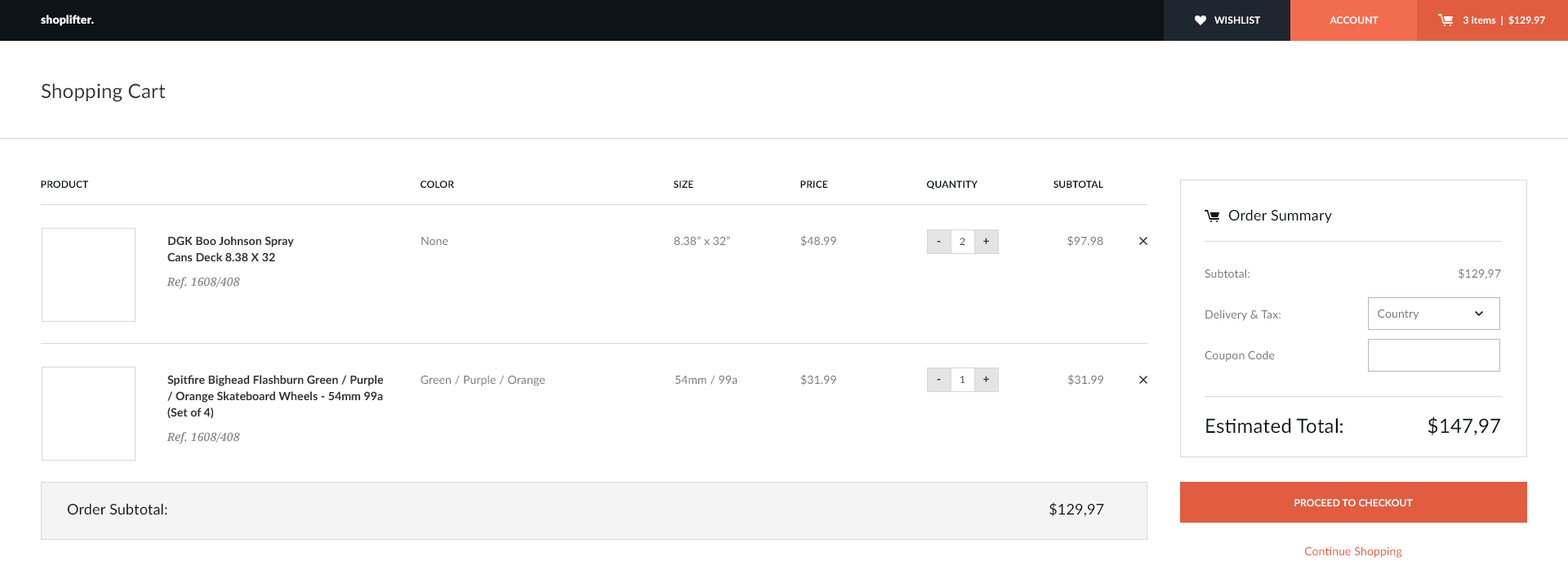
<style>
.page{position:relative;width:1568px;height:588px;background:#ffffff}
.page>*{position:absolute;margin:0}
.t1{font:11.4px "Lato-Black";letter-spacing:0.01em;color:#ffffff}
.t2{font:9.8px "Lato-Bold";letter-spacing:0.01em;color:#ffffff;text-transform:uppercase}
.t3{font:9.8px "Lato-Bold";letter-spacing:0.01em;color:#ffffff}
.t4{font:19.6px "Lato-Regular";letter-spacing:0.01em;color:#313131}
.t5{font:9.8px "Lato-Bold";letter-spacing:0.01em;color:#0e1317;text-transform:uppercase}
.t6{font:14.7px "Lato-Regular";letter-spacing:0.01em;color:#0e1317}
.t7{font:11.4px/16.3px "Lato-Bold";color:#313131}
.t8{font:11.4px/24.5px "DroidSerif-Italic";letter-spacing:0.01em;color:#313131}
.t9{font:11.4px "Lato-Regular";color:#767676}
.t10{font:11.4px "Lato-Bold";letter-spacing:0.01em;color:#313131}
.t11{font:9.8px "Lato-Regular";letter-spacing:0.01em;color:#313131}
.t12{font:11.4px/40.8px "Lato-Regular";letter-spacing:0.01em;color:#767676}
.t13{font:11.4px "Lato-Regular";letter-spacing:0.01em;color:#767676}
.t14{font:19.6px "Lato-Regular";letter-spacing:0.01em;color:#0e1317}
.t15{font:11.4px "Lato-Regular";letter-spacing:0.01em;color:#e25d40}
</style>
<div class="page">
<p class="t1" style="left:41px;top:15px;width:53px;height:11px">shoplifter.</p>
<p class="t2" style="left:1214px;top:16px;width:46px;height:8px">wishlist</p>
<p class="t2" style="left:1330px;top:16px;width:49px;height:8px">Account</p>
<p class="t3" style="left:1463px;top:16px;width:82px;height:9px">3 items  |  $129.97</p>
<p class="t4" style="left:41px;top:83px;width:125px;height:19px">Shopping Cart</p>
<p class="t5" style="left:41px;top:180px;width:47px;height:8px">Product</p>
<p class="t5" style="left:421px;top:180px;width:33px;height:8px">COlor</p>
<p class="t5" style="left:673px;top:180px;width:20px;height:8px">Size</p>
<p class="t5" style="left:800px;top:180px;width:28px;height:8px">Price</p>
<p class="t5" style="left:927px;top:180px;width:51px;height:9px">quantity</p>
<p class="t5" style="left:1054px;top:180px;width:49px;height:8px">subtotal</p>
<p class="t6" style="left:1228px;top:209px;width:104px;height:14px">Order Summary</p>
<p class="t7" style="left:167px;top:236px;width:127px;height:53px">DGK Boo Johnson Spray <br>Cans Deck 8.38 X 32<br><span class="t8">Ref. 1608/408</span></p>
<p class="t9" style="left:421px;top:237px;width:27px;height:8px">None</p>
<p class="t9" style="left:674px;top:236px;width:56px;height:9px">8.38” x 32”</p>
<p class="t9" style="left:800px;top:235px;width:36px;height:12px">$48.99</p>
<p class="t10" style="left:937px;top:241px;width:4px;height:2px">-</p>
<p class="t11" style="left:960px;top:238px;width:5px;height:7px">2</p>
<p class="t10" style="left:983px;top:238px;width:6px;height:6px">+</p>
<p class="t9" style="left:1067px;top:235px;width:36px;height:12px">$97.98</p>
<p class="t12" style="left:1205px;top:269px;width:76px;height:93px">Subtotal:<br>Delivery &amp; Tax:<br>Coupon Code</p>
<p class="t13" style="left:1459px;top:268px;width:42px;height:11px">$129,97</p>
<p class="t13" style="left:1378px;top:309px;width:41px;height:11px">Country</p>
<p class="t7" style="left:167px;top:375px;width:216px;height:69px">Spitfire Bighead Flashburn Green / Purple / Orange Skateboard Wheels - 54mm 99a (Set of 4)<br><span class="t8">Ref. 1608/408</span></p>
<p class="t9" style="left:421px;top:375px;width:124px;height:11px">Green / Purple / Orange</p>
<p class="t9" style="left:675px;top:375px;width:62px;height:10px">54mm / 99a</p>
<p class="t9" style="left:800px;top:374px;width:36px;height:11px">$31.99</p>
<p class="t11" style="left:960px;top:376px;width:4px;height:7px">1</p>
<p class="t10" style="left:983px;top:376px;width:6px;height:6px">+</p>
<p class="t9" style="left:1068px;top:374px;width:35px;height:11px">$31.99</p>
<p class="t10" style="left:937px;top:379px;width:4px;height:2px">-</p>
<p class="t14" style="left:1206px;top:418px;width:137px;height:16px">Estimated Total:</p>
<p class="t14" style="left:1428px;top:416px;width:72px;height:20px">$147,97</p>
<p class="t6" style="left:67px;top:503px;width:100px;height:12px">Order Subtotal:</p>
<p class="t6" style="left:1049px;top:502px;width:55px;height:15px">$129,97</p>
<p class="t2" style="left:1294px;top:499px;width:119px;height:7px">proceed to checkout</p>
<p class="t15" style="left:1305px;top:546px;width:97px;height:12px">Continue Shopping</p>
</div>
